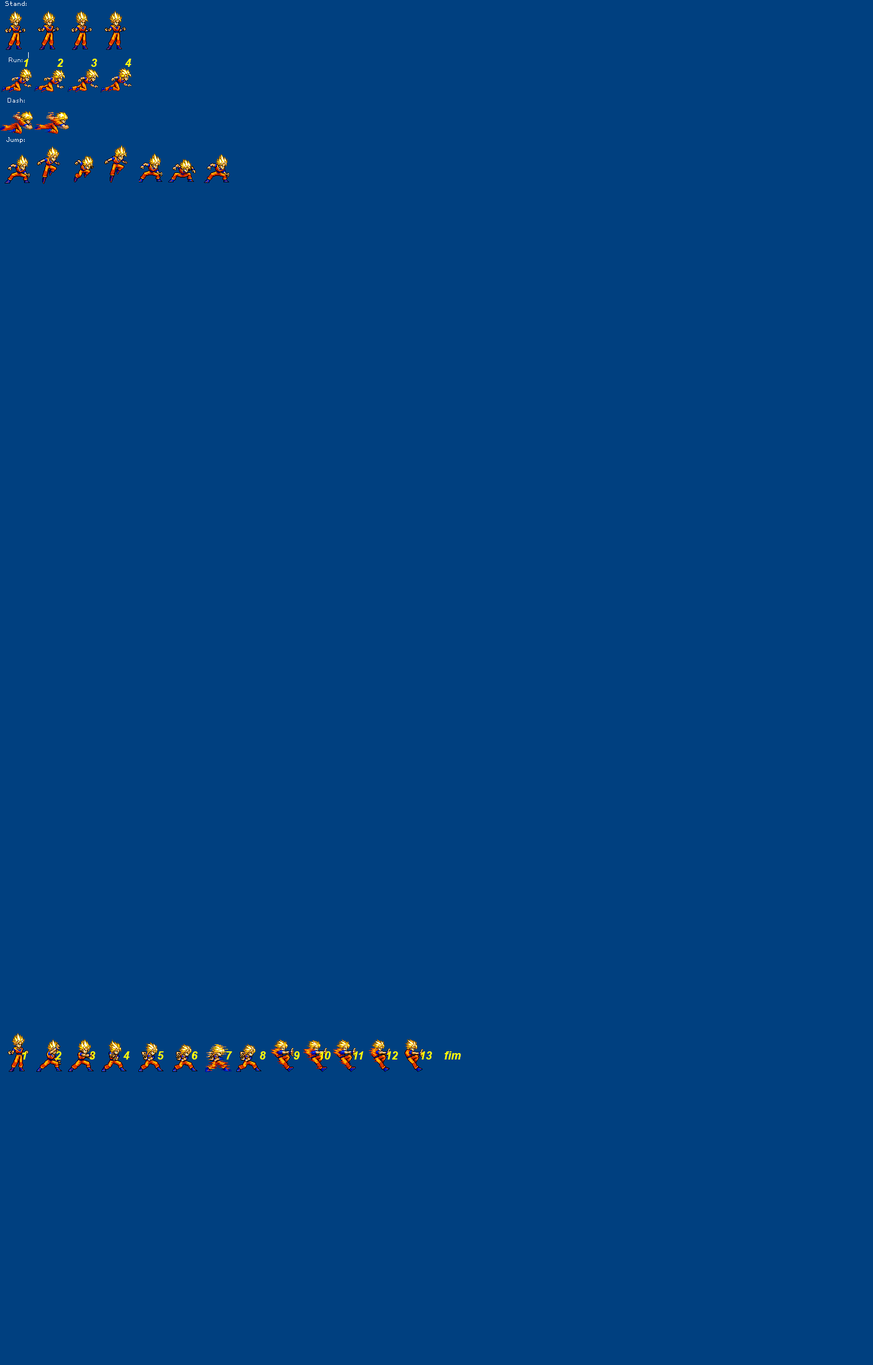
<style>
.page{position:relative;width:873px;height:1365px;background:#004080}
.page>*{position:absolute;margin:0}
.t1{font:11.1px "Arial-BoldItalicMT";color:#fffc00}
</style>
<div class="page">
<p class="t1" style="left:24px;top:59px;width:107px;height:8px">1         2         3         4</p>
<p class="t1" style="left:22px;top:1052px;width:439px;height:8px">1         2         3         4         5         6         7         8         9      10       11       12       13    fim</p>
</div>
